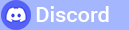
<style>
.page{position:relative;width:129px;height:30px;background:#a4b6fe}
.page>*{position:absolute;margin:0}
.t1{font:21.3px "Roboto-Medium";color:#ffffff}
</style>
<div class="page">
<p class="t1" style="left:36px;top:6px;width:73px;height:16px">Discord</p>
</div>
